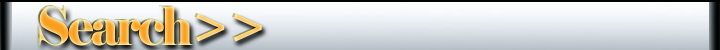
<style>
.page{position:relative;width:720px;height:50px}
.page>*{position:absolute;margin:0}
.t1{font:52.8px "Elephant-Regular";letter-spacing:-0.05em;scale:0.91 1}
</style>
<div class="page">
<p class="t1" style="left:37px;top:5px;width:223px;height:40px">Search&gt;&gt;</p>
<p class="t1" style="left:39px;top:6px;width:223px;height:40px">Search&gt;&gt;</p>
</div>
